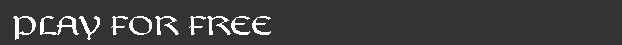
<style>
.page{position:relative;width:622px;height:45px;background:#333333}
.page>*{position:absolute;margin:0}
.t1{font:27.9px "Balgruf";color:#ffffff;text-transform:uppercase;scale:1.21 1}
</style>
<div class="page">
<p class="t1" style="left:13px;top:16px;width:258px;height:24px">play for free</p>
</div>
